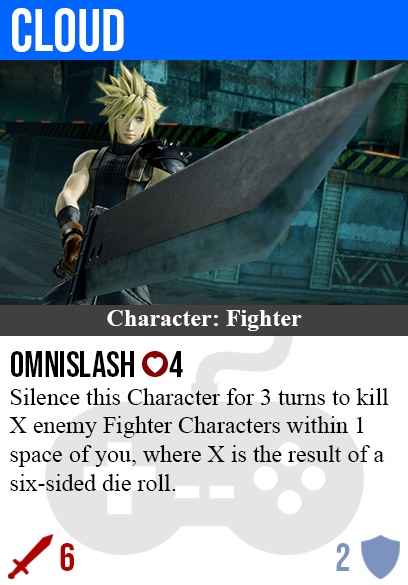
<style>
.page{position:relative;width:408px;height:585px;background:#ffffff}
.page>*{position:absolute;margin:0}
.t1{font:60px "BebasNeue-Regular";color:#ffffff}
.t2{font:24px "TimesNewRomanPS-BoldMT";color:#ffffff}
.t3{font:36px "BebasNeue-Regular";color:#000000}
.t4{font:24px "TimesNewRomanPSMT";color:#000000}
.t5{font:40px "BebasNeue-Regular";color:#af0202}
.t6{font:40px "BebasNeue-Regular";color:#7c94bd}
</style>
<div class="page">
<p class="t1" style="left:12px;top:8px;width:112px;height:44px">cloud</p>
<p class="t2" style="left:107px;top:310px;width:195px;height:21px">Character: Fighter</p>
<p class="t3" style="left:11px;top:351px;width:172px;height:26px">omnislash      4</p>
<p class="t4" style="left:9px;top:388px;width:380px;height:103px">Silence this Character for 3 turns to kill<br>X enemy Fighter Characters within 1<br>space of you, where X is the result of a<br>six-sided die roll.</p>
<p class="t5" style="left:60px;top:543px;width:14px;height:28px">6</p>
<p class="t6" style="left:336px;top:543px;width:14px;height:28px">2</p>
</div>
